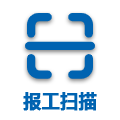
<style>
.page{position:relative;width:120px;height:120px;background:#ffffff}
.page>*{position:absolute;margin:0}
.t1{font:18px "MicrosoftYaHei-Bold";color:#0063b1;font-weight:bold}
</style>
<div class="page">
<p class="t1" style="left:23px;top:92px;width:74px;height:19px">报工扫描</p>
</div>
